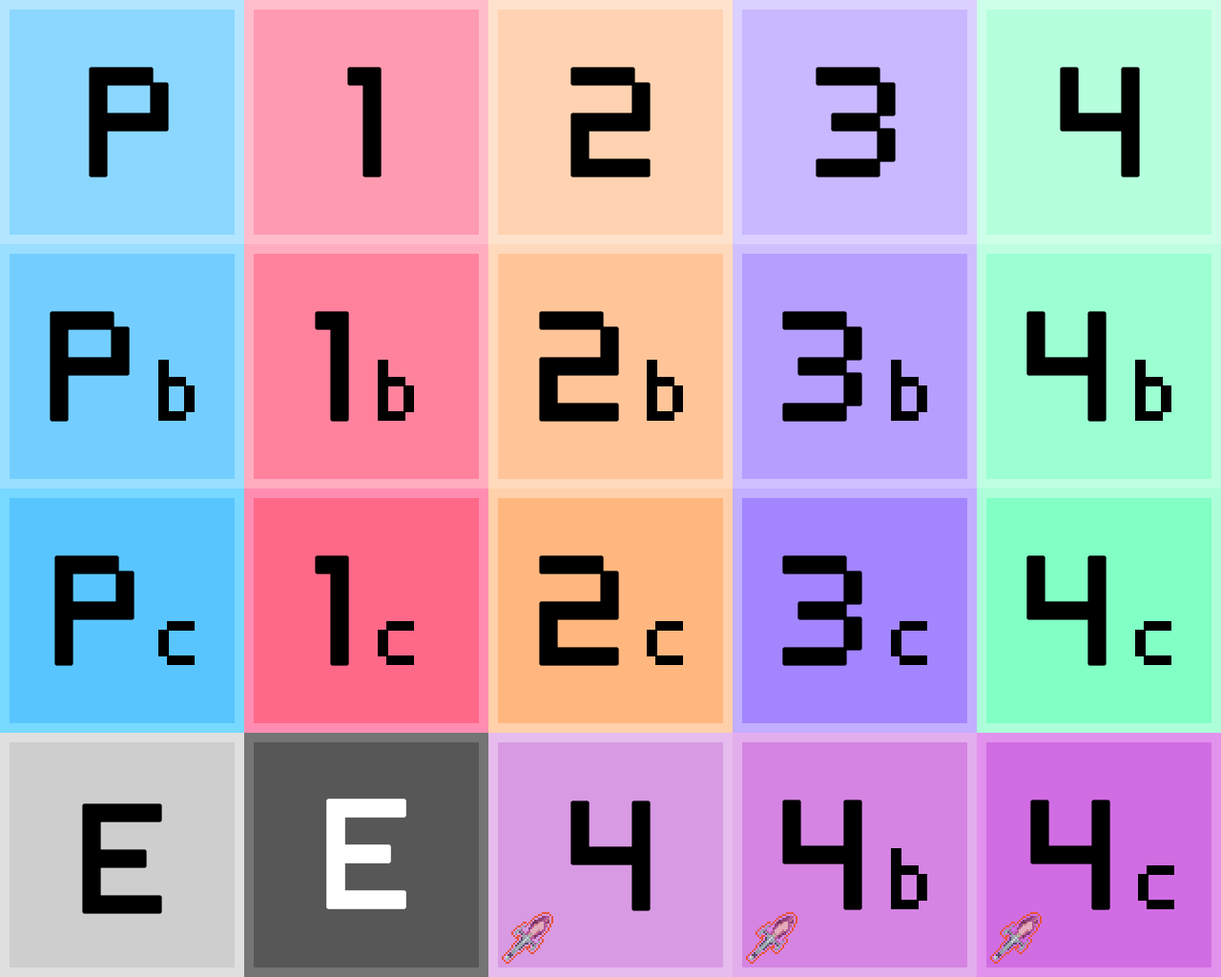
<style>
.page{position:relative;width:1221px;height:977px}
.page>*{position:absolute;margin:0}
.t1{font:122.1px "RiskofRainFont";color:#000000;font-weight:bold}
.t2{font:68.7px "RiskofRainFont";color:#000000;font-weight:bold}
.t3{font:122.1px "RiskofRainFont";color:#ffffff;font-weight:bold}
</style>
<div class="page">
<p class="t1" style="left:89px;top:67px;width:80px;height:110px">P</p>
<p class="t1" style="left:347px;top:67px;width:35px;height:110px">1</p>
<p class="t1" style="left:570px;top:67px;width:80px;height:110px">2</p>
<p class="t1" style="left:816px;top:67px;width:80px;height:110px">3</p>
<p class="t1" style="left:1060px;top:67px;width:80px;height:110px">4</p>
<p class="t1" style="left:50px;top:311px;width:145px;height:111px">P<span class="t2">b</span></p>
<p class="t1" style="left:315px;top:311px;width:99px;height:111px">1<span class="t2">b</span></p>
<p class="t1" style="left:539px;top:311px;width:144px;height:111px">2<span class="t2">b</span></p>
<p class="t1" style="left:782px;top:311px;width:145px;height:111px">3<span class="t2">b</span></p>
<p class="t1" style="left:1026px;top:311px;width:145px;height:111px">4<span class="t2">b</span></p>
<p class="t1" style="left:54px;top:555px;width:141px;height:111px">P<span class="t2">c</span></p>
<p class="t1" style="left:315px;top:555px;width:99px;height:111px">1<span class="t2">c</span></p>
<p class="t1" style="left:539px;top:555px;width:144px;height:111px">2<span class="t2">c</span></p>
<p class="t1" style="left:782px;top:555px;width:145px;height:111px">3<span class="t2">c</span></p>
<p class="t1" style="left:1026px;top:555px;width:145px;height:111px">4<span class="t2">c</span></p>
<p class="t1" style="left:82px;top:803px;width:80px;height:111px">E</p>
<p class="t3" style="left:326px;top:798px;width:80px;height:111px">E</p>
<p class="t1" style="left:570px;top:800px;width:80px;height:111px">4</p>
<p class="t1" style="left:782px;top:799px;width:145px;height:111px">4<span class="t2">b</span></p>
<p class="t1" style="left:1030px;top:799px;width:144px;height:111px">4<span class="t2">c</span></p>
</div>
